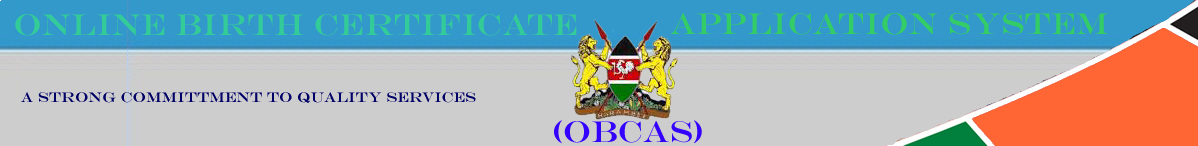
<style>
.page{position:relative;width:1198px;height:146px;background:#cdcdcd}
.page>*{position:absolute;margin:0}
.t1{font:30px "EngraversMT";color:#33cc99}
.t2{font:30px "EngraversMT";color:#33cc66}
.t3{font:14px "EngraversMT";color:#000066}
.t4{font:30px "EngraversMT";color:#3300ff}
</style>
<div class="page">
<p class="t1" style="left:15px;top:14px;width:562px;height:22px">ONLINE BIRTH CERTIFICATE</p>
<p class="t2" style="left:670px;top:13px;width:439px;height:22px">APPLICATION SYSTEM</p>
<p class="t3" style="left:21px;top:92px;width:455px;height:11px">A STRONG COMMITTMENT TO QUALITY SERVICES</p>
<p class="t4" style="left:554px;top:120px;width:148px;height:24px">(OBCAS)</p>
</div>
